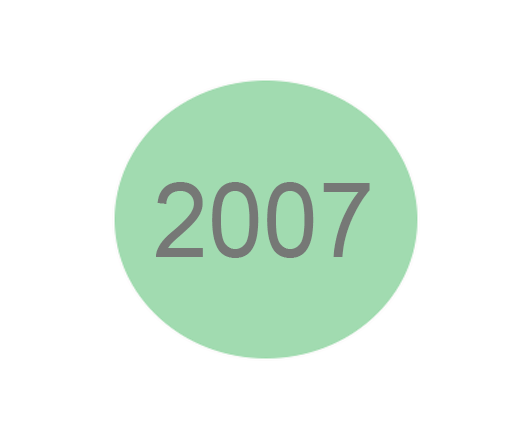
<style>
.page{position:relative;width:519px;height:433px;background:#ffffff}
.page>*{position:absolute;margin:0}
.t1{font:104.8px "ArialMT";color:#767876;scale:0.95 1}
</style>
<div class="page">
<p class="t1" style="left:156px;top:182px;width:214px;height:76px">2007</p>
</div>
